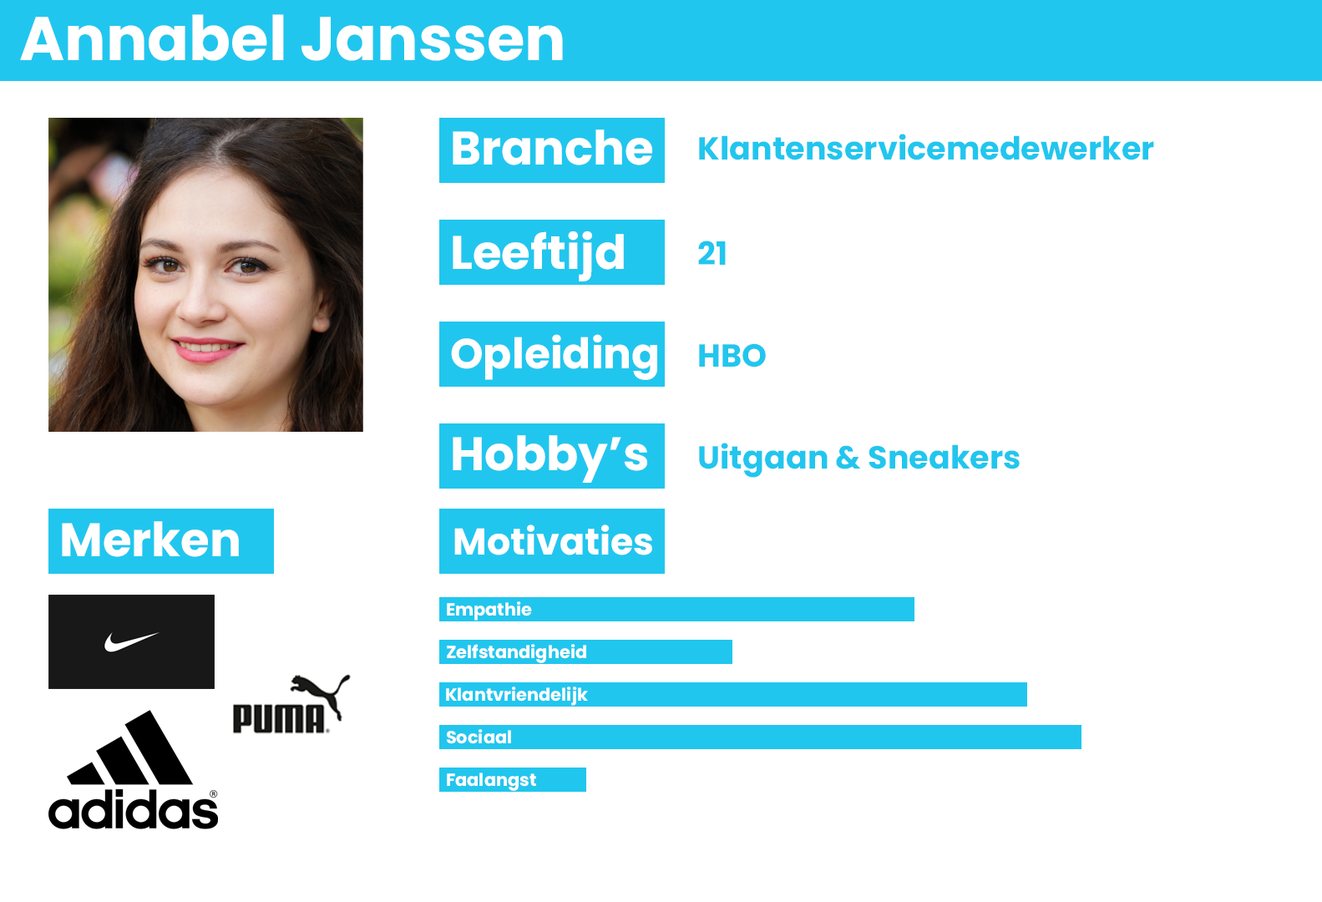
<style>
.page{position:relative;width:1322px;height:902px;background:#ffffff}
.page>*{position:absolute;margin:0}
.t1{font:61.4px "Poppins-Bold";color:#ffffff}
.t2{font:47px "Poppins-Bold";color:#ffffff}
.t3{font:31.9px "Poppins-Bold";color:#21c6ee}
.t4{font:42.1px "Poppins-Bold";color:#ffffff}
.t5{font:37.1px "Poppins-Bold";color:#ffffff}
.t6{font:17.4px "Poppins-Bold";color:#ffffff}
</style>
<div class="page">
<p class="t1" style="left:20px;top:14px;width:543px;height:47px">Annabel Janssen</p>
<p class="t2" style="left:453px;top:129px;width:200px;height:36px">Branche</p>
<p class="t3" style="left:699px;top:134px;width:455px;height:26px">Klantenservicemedewerker</p>
<p class="t2" style="left:453px;top:231px;width:171px;height:50px">Leeftijd</p>
<p class="t3" style="left:698px;top:241px;width:28px;height:24px">21</p>
<p class="t4" style="left:451px;top:334px;width:206px;height:46px">Opleiding</p>
<p class="t3" style="left:699px;top:343px;width:67px;height:24px">HBO</p>
<p class="t2" style="left:453px;top:435px;width:194px;height:48px">Hobby’s</p>
<p class="t3" style="left:699px;top:443px;width:321px;height:35px">Uitgaan &amp; Sneakers</p>
<p class="t2" style="left:62px;top:521px;width:177px;height:36px">Merken</p>
<p class="t5" style="left:454px;top:524px;width:198px;height:31px">Motivaties</p>
<p class="t6" style="left:447px;top:601px;width:85px;height:20px">Empathie</p>
<p class="t6" style="left:447px;top:644px;width:139px;height:19px">Zelfstandigheid</p>
<p class="t6" style="left:446px;top:686px;width:142px;height:20px">Klantvriendelijk</p>
<p class="t6" style="left:447px;top:729px;width:64px;height:15px">Sociaal</p>
<p class="t6" style="left:447px;top:773px;width:89px;height:18px">Faalangst</p>
</div>
